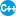
<style>
.page{position:relative;width:16px;height:16px;background:#009cdd}
.page>*{position:absolute;margin:0}
.t1{font:8.9px "ArialMT";color:#ffffff;font-variant:small-caps;font-weight:bold;scale:0.89 1}
</style>
<div class="page">
<p class="t1" style="left:1px;top:4px;width:16px;height:8px">C++</p>
</div>
